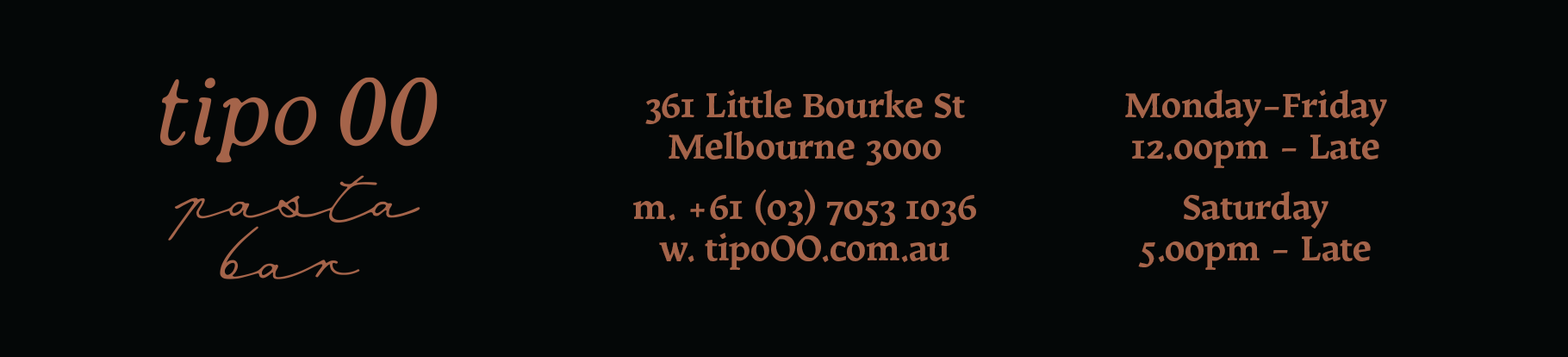
<style>
.page{position:relative;width:1568px;height:357px;background:#040707}
.page>*{position:absolute;margin:0}
.t1{font:40.5px/41.4px "Karol-Bold";letter-spacing:-0.005em;color:#a5644a}
.t2{font:40.5px/19px "Karol-Bold";letter-spacing:-0.005em;color:#a5644a}
</style>
<div class="page">
<p class="t1" style="left:633px;top:90px;width:343px;height:180px;text-align:center">361 Little Bourke St<br>Melbourne 3000<br><span class="t2"><br></span>m. +61 (03) 7053 1036<br>w. tipoOO.com.au</p>
<p class="t1" style="left:1125px;top:90px;width:262px;height:180px;text-align:center">Monday-Friday<br>12.00pm - Late<br><span class="t2"><br></span>Saturday<br>5.00pm - Late</p>
</div>
